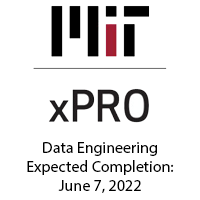
<style>
.page{position:relative;width:200px;height:200px;background:#ffffff}
.page>*{position:absolute;margin:0}
.t1{font:16px "MyriadPro-Regular";color:#000000}
</style>
<div class="page">
<p class="t1" style="left:27px;top:142px;width:147px;height:51px;text-align:center">Data Engineering<br>Expected Completion:<br>June 7, 2022</p>
</div>
